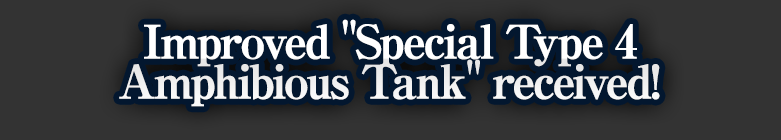
<style>
.page{position:relative;width:781px;height:140px;background:#333333}
.page>*{position:absolute;margin:0}
.t1{font:46px/40px "RyuminPro-ExBold";letter-spacing:-0.08em;color:#ffffff;font-weight:bold}
</style>
<div class="page">
<p class="t1" style="left:119px;top:19px;width:541px;height:88px;text-align:center">Improved "Special Type 4<br>Amphibious Tank" received!</p>
</div>
